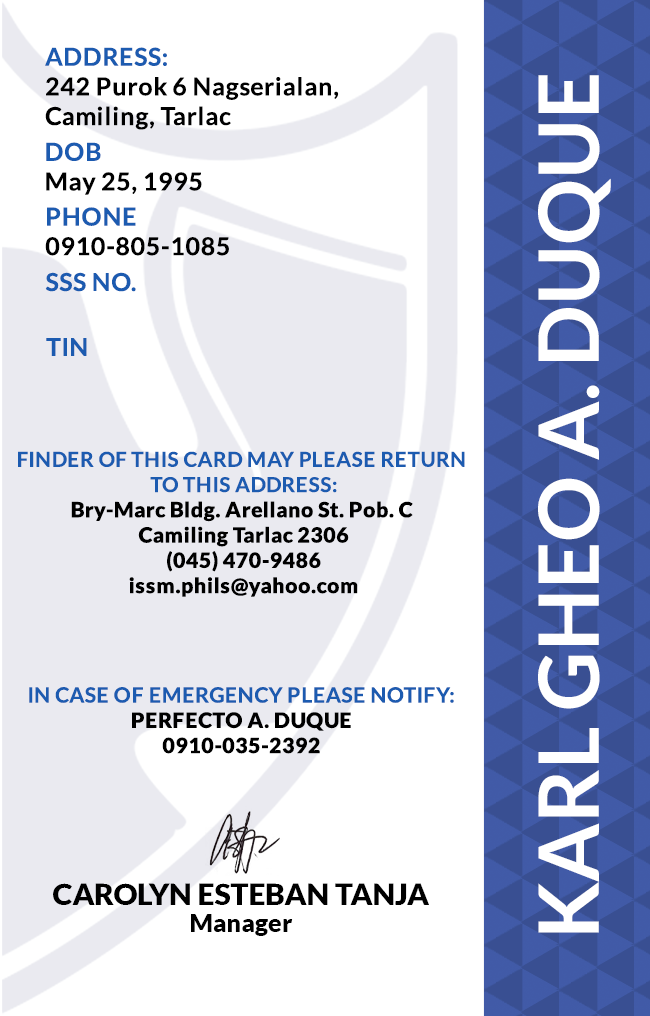
<style>
.page{position:relative;width:650px;height:1016px;background:#ffffff}
.page>*{position:absolute;margin:0}
.t1{font:24.7px/29.6px "Lato-Bold";letter-spacing:0.025em;color:#000000}
.t2{font:24.7px/29.6px "Lato-Bold";letter-spacing:0.025em;color:#1c5bb0}
.t3{font:83.3px "Lato-Bold";color:#ffffff}
.t4{font:24.7px "Lato-Bold";letter-spacing:0.025em;color:#1c5bb0}
.t5{font:21.1px "Lato-Black";letter-spacing:0.025em}
.t6{font:20.5px/25.3px "Lato-Bold";letter-spacing:0.025em;text-transform:uppercase}
.t7{font:21.1px/25.3px "Lato-Bold";letter-spacing:0.025em;color:#1c5bb0}
.t8{font:21.1px "Lato-Black";letter-spacing:0.025em;color:#000000}
.t9{font:29.5px "Lato-Black";color:#000000}
.t10{font:25px "Lato-Black";color:#000000}
</style>
<div class="page">
<p class="t1" style="left:45px;top:47px;width:294px;height:83px"><span class="t2">ADDRESS:<br></span>242 Purok 6 Nagserialan,<br>Camiling, Tarlac</p>
<p class="t3" style="left:538px;top:75px;width:73px;height:858px;rotate:-90deg">KARL GHEO A. DUQUE</p>
<p class="t1" style="left:46px;top:142px;width:156px;height:53px"><span class="t2">DOB<br></span>May 25, 1995</p>
<p class="t1" style="left:45px;top:207px;width:184px;height:49px"><span class="t2">PHONE <br></span>0910-805-1085</p>
<p class="t4" style="left:45px;top:272px;width:91px;height:20px">SSS NO.</p>
<p class="t4" style="left:46px;top:338px;width:41px;height:18px">TIN</p>
<p class="t5" style="left:18px;top:451px;width:447px;height:146px;text-align:center"><span class="t6">Finder of this card may please return <br>to this address:<br></span>Bry-Marc Bldg. Arellano St. Pob. C <br>Camiling Tarlac 2306<br>(045) 470-9486<br>issm.phils@yahoo.com</p>
<p class="t7" style="left:29px;top:687px;width:425px;height:67px;text-align:center">IN CASE OF EMERGENCY PLEASE NOTIFY:<br><span class="t8">PERFECTO A. DUQUE<br>0910-035-2392</span></p>
<p class="t9" style="left:53px;top:883px;width:376px;height:22px">CAROLYN ESTEBAN TANJA</p>
<p class="t10" style="left:191px;top:914px;width:102px;height:22px">Manager</p>
</div>
